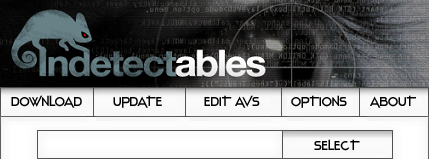
<style>
.page{position:relative;width:429px;height:159px}
.page>*{position:absolute;margin:0}
.t1{font:13.3px "Stentiga-Regular";color:#000000}
</style>
<div class="page">
<p class="t1" style="left:11px;top:95px;width:71px;height:13px">DOWNLOAD</p>
<p class="t1" style="left:113px;top:95px;width:49px;height:13px">UPDATE</p>
<p class="t1" style="left:204px;top:95px;width:56px;height:13px">EDIT AVS</p>
<p class="t1" style="left:291px;top:95px;width:56px;height:13px">OPTIONS</p>
<p class="t1" style="left:370px;top:95px;width:46px;height:13px">ABOUT</p>
<p class="t1" style="left:314px;top:139px;width:46px;height:12px">SELECT</p>
</div>
